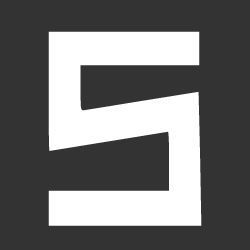
<style>
.page{position:relative;width:250px;height:250px;background:#333333}
.page>*{position:absolute;margin:0}
.t1{font:400px "RecinoStudio-Regular";color:#ffffff}
</style>
<div class="page">
<p class="t1" style="left:48px;top:31px;width:154px;height:195px">S</p>
</div>
